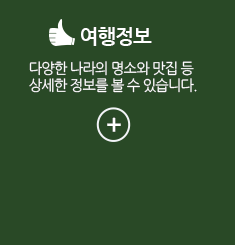
<style>
.page{position:relative;width:235px;height:245px;background:#294926}
.page>*{position:absolute;margin:0}
.t1{font:20px "NanumGothic-Bold";letter-spacing:-0.05em;color:#ffffff;text-transform:uppercase}
.t2{font:14.7px "NanumGothic";letter-spacing:-0.05em;color:#ffffff;text-transform:uppercase;scale:0.97 1}
.t3{font:25.2px "NanumGothic-Bold";letter-spacing:-0.05em;color:#ffffff;text-transform:uppercase;scale:0.97 1}
</style>
<div class="page">
<p class="t1" style="left:81px;top:27px;width:71px;height:19px">여행정보</p>
<p class="t2" style="left:29px;top:61px;width:168px;height:32px">다양한 나라의 명소와 맛집 등<br>상세한 정보를 볼 수 있습니다.</p>
<p class="t3" style="left:107px;top:117px;width:14px;height:15px">+</p>
</div>
